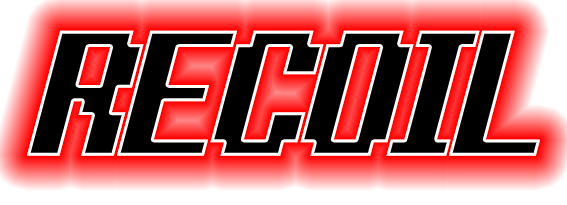
<style>
.page{position:relative;width:567px;height:205px;background:#000000}
.page>*{position:absolute;margin:0}
.t1{font:180px "Fixedsys";letter-spacing:-0.11em;color:#000000;font-weight:bold;scale:0.97 1}
.t2{font:180px "Fixedsys";letter-spacing:-0.19em;color:#000000;font-weight:bold;scale:0.97 1}
</style>
<div class="page">
<p class="t1" style="left:27px;top:30px;width:513px;height:126px">REC<span class="t2">OI</span>L</p>
</div>
